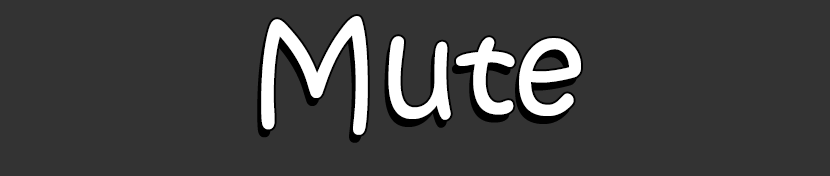
<style>
.page{position:relative;width:830px;height:176px;background:#333333}
.page>*{position:absolute;margin:0}
.t1{font:124.4px "KristenITC-Regular";color:#ffffff}
</style>
<div class="page">
<p class="t1" style="left:261px;top:16px;width:320px;height:119px">Mute</p>
</div>
